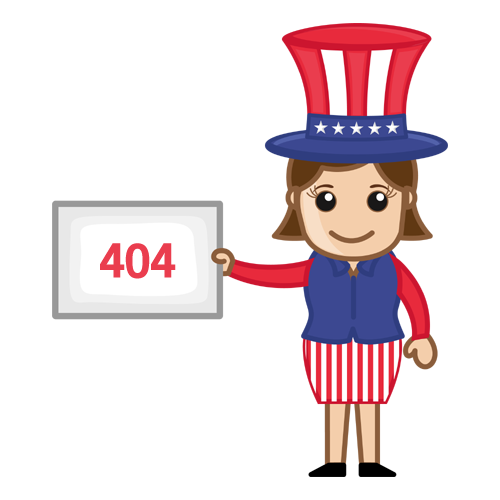
<style>
.page{position:relative;width:500px;height:500px;background:#ffffff}
.page>*{position:absolute;margin:0}
.t1{font:48px "Coolvetica";color:#ea3d4e}
</style>
<div class="page">
<p class="t1" style="left:100px;top:243px;width:76px;height:36px">404</p>
</div>
